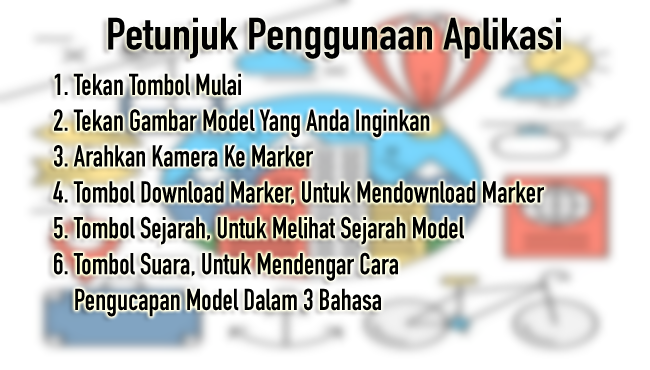
<style>
.page{position:relative;width:650px;height:370px;background:#ffffff}
.page>*{position:absolute;margin:0}
.t1{font:44.5px "DINEngschrift-Alternate";color:#000000;scale:1.09 1}
.t2{font:29.9px "DINEngschrift-Alternate";color:#000000;scale:0.94 1}
</style>
<div class="page">
<p class="t1" style="left:108px;top:17px;width:453px;height:42px">Petunjuk Penggunaan Aplikasi</p>
<p class="t2" style="left:53px;top:73px;width:491px;height:244px">1. Tekan Tombol Mulai<br>2. Tekan Gambar Model Yang Anda Inginkan<br>3. Arahkan Kamera Ke Marker<br>4. Tombol Download Marker, Untuk Mendownload Marker<br>5. Tombol Sejarah, Untuk Melihat Sejarah Model<br>6. Tombol Suara, Untuk Mendengar Cara <br>    Pengucapan Model Dalam 3 Bahasa</p>
</div>
